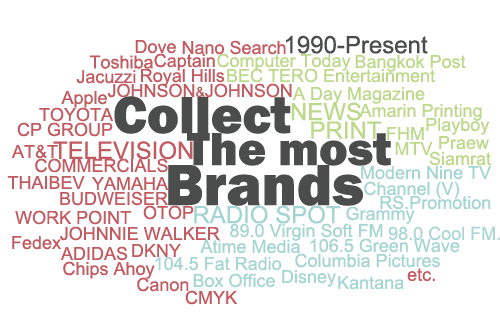
<style>
.page{position:relative;width:500px;height:333px;background:#ffffff}
.page>*{position:absolute;margin:0}
.t1{font:18px "ArialMT";color:#c15b61}
.t2{font:24px "ArialMT";color:#4a4d4b}
.t3{font:18px "ArialMT";color:#bdd88a}
.t4{font:14px "ArialMT";color:#c15b61}
.t5{font:54px "FranklinGothic-Heavy";color:#4a4d4b}
.t6{font:24px "ArialMT";color:#bdd88a}
.t7{font:48px "FranklinGothic-Heavy";color:#4a4d4b}
.t8{font:24px "ArialMT";color:#c15b61}
.t9{font:60px "FranklinGothic-Heavy";color:#4a4d4b}
.t10{font:18px "ArialMT";color:#a5d5d2}
.t11{font:24px "ArialMT";color:#a5d5d2}
.t12{font:18px "ArialMT";color:#aad7d5}
</style>
<div class="page">
<p class="t1" style="left:135px;top:40px;width:41px;height:14px">Dove</p>
<p class="t1" style="left:182px;top:40px;width:104px;height:15px">Nano Search</p>
<p class="t2" style="left:286px;top:35px;width:142px;height:19px">1990-Present</p>
<p class="t1" style="left:154px;top:53px;width:61px;height:18px">Captain</p>
<p class="t3" style="left:217px;top:53px;width:134px;height:18px">Computer Today</p>
<p class="t1" style="left:89px;top:55px;width:64px;height:14px">Toshiba</p>
<p class="t3" style="left:355px;top:55px;width:111px;height:17px">Bangkok Post</p>
<p class="t1" style="left:76px;top:70px;width:60px;height:14px">Jacuzzi</p>
<p class="t1" style="left:141px;top:69px;width:84px;height:17px">Royal Hills</p>
<p class="t3" style="left:227px;top:68px;width:208px;height:15px">BEC TERO Entertainment</p>
<p class="t1" style="left:108px;top:83px;width:184px;height:15px">JOHNSON<span class="t4">&amp;</span>JOHNSON</p>
<p class="t3" style="left:292px;top:87px;width:133px;height:17px">A Day Magazine</p>
<p class="t1" style="left:61px;top:91px;width:46px;height:17px">Apple</p>
<p class="t5" style="left:114px;top:96px;width:177px;height:38px">Collect</p>
<p class="t6" style="left:291px;top:102px;width:70px;height:19px">NEWS</p>
<p class="t1" style="left:39px;top:107px;width:75px;height:15px">TOYOTA</p>
<p class="t3" style="left:359px;top:104px;width:123px;height:17px">Amarin Printing</p>
<p class="t1" style="left:17px;top:122px;width:96px;height:15px">CP GROUP</p>
<p class="t6" style="left:311px;top:121px;width:71px;height:18px">PRINT</p>
<p class="t3" style="left:426px;top:118px;width:64px;height:17px">Playboy</p>
<p class="t7" style="left:187px;top:133px;width:204px;height:33px">The most</p>
<p class="t3" style="left:387px;top:127px;width:37px;height:13px">FHM</p>
<p class="t3" style="left:439px;top:136px;width:50px;height:14px">Praew</p>
<p class="t1" style="left:11px;top:144px;width:47px;height:15px">AT&amp;T</p>
<p class="t8" style="left:53px;top:141px;width:140px;height:19px">TELEVISION</p>
<p class="t3" style="left:395px;top:142px;width:38px;height:13px">MTV</p>
<p class="t1" style="left:35px;top:158px;width:133px;height:15px">COMMERCIALS</p>
<p class="t3" style="left:429px;top:151px;width:62px;height:15px">Siamrat</p>
<p class="t9" style="left:168px;top:165px;width:195px;height:41px">Brands</p>
<p class="t10" style="left:361px;top:166px;width:130px;height:14px">Modern Nine TV</p>
<p class="t1" style="left:7px;top:176px;width:78px;height:13px">THAIBEV</p>
<p class="t1" style="left:92px;top:177px;width:77px;height:13px">YAMAHA</p>
<p class="t10" style="left:364px;top:181px;width:95px;height:18px">Channel (V)</p>
<p class="t1" style="left:60px;top:191px;width:108px;height:15px">BUDWEISER</p>
<p class="t10" style="left:380px;top:195px;width:111px;height:15px">RS.Promotion</p>
<p class="t1" style="left:143px;top:205px;width:51px;height:15px">OTOP</p>
<p class="t11" style="left:194px;top:205px;width:147px;height:19px">RADIO SPOT</p>
<p class="t10" style="left:346px;top:206px;width:69px;height:18px">Grammy</p>
<p class="t1" style="left:15px;top:210px;width:116px;height:15px">WORK POINT</p>
<p class="t1" style="left:60px;top:226px;width:160px;height:15px">JOHNNIE WALKER</p>
<p class="t10" style="left:230px;top:223px;width:153px;height:18px">89.0 Virgin Soft FM</p>
<p class="t12" style="left:388px;top:226px;width:112px;height:14px">98.0 Cool FM.</p>
<p class="t1" style="left:12px;top:236px;width:49px;height:14px">Fedex</p>
<p class="t1" style="left:60px;top:246px;width:68px;height:15px">ADIDAS</p>
<p class="t1" style="left:132px;top:244px;width:49px;height:13px">DKNY</p>
<p class="t10" style="left:200px;top:239px;width:100px;height:14px">Atime Media</p>
<p class="t10" style="left:310px;top:238px;width:150px;height:15px">106.5 Green Wave</p>
<p class="t10" style="left:155px;top:256px;width:127px;height:15px">104.5 Fat Radio</p>
<p class="t10" style="left:295px;top:253px;width:145px;height:15px">Columbia Pictures</p>
<p class="t1" style="left:63px;top:261px;width:92px;height:18px">Chips Ahoy</p>
<p class="t10" style="left:282px;top:270px;width:54px;height:17px">Disney</p>
<p class="t1" style="left:407px;top:268px;width:28px;height:13px">etc.</p>
<p class="t1" style="left:137px;top:277px;width:52px;height:15px">Canon</p>
<p class="t10" style="left:193px;top:273px;width:82px;height:15px">Box Office</p>
<p class="t10" style="left:338px;top:276px;width:66px;height:14px">Kantana</p>
<p class="t1" style="left:185px;top:290px;width:52px;height:15px">CMYK</p>
</div>
